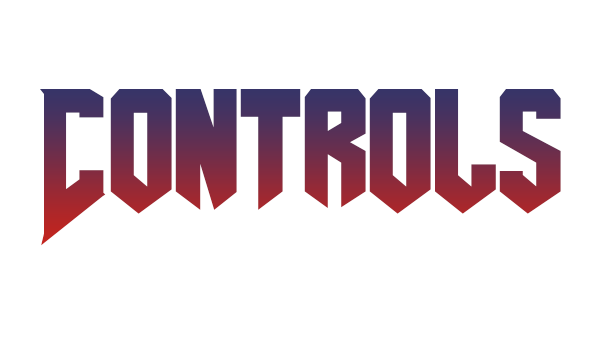
<style>
.page{position:relative;width:597px;height:356px;background:#ffffff}
.page>*{position:absolute;margin:0}
.t1{font:200px "AmazDooMLeft"}
</style>
<div class="page">
<p class="t1" style="left:40px;top:89px;width:521px;height:157px">Controls</p>
</div>
